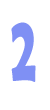
<style>
.page{position:relative;width:50px;height:110px;background:#ffffff}
.page>*{position:absolute;margin:0}
.t1{font:96px "BerlinSansFBDemi-Bold";color:#7f90f4;scale:0.5 1}
</style>
<div class="page">
<p class="t1" style="left:11px;top:22px;width:25px;height:60px">2</p>
</div>
